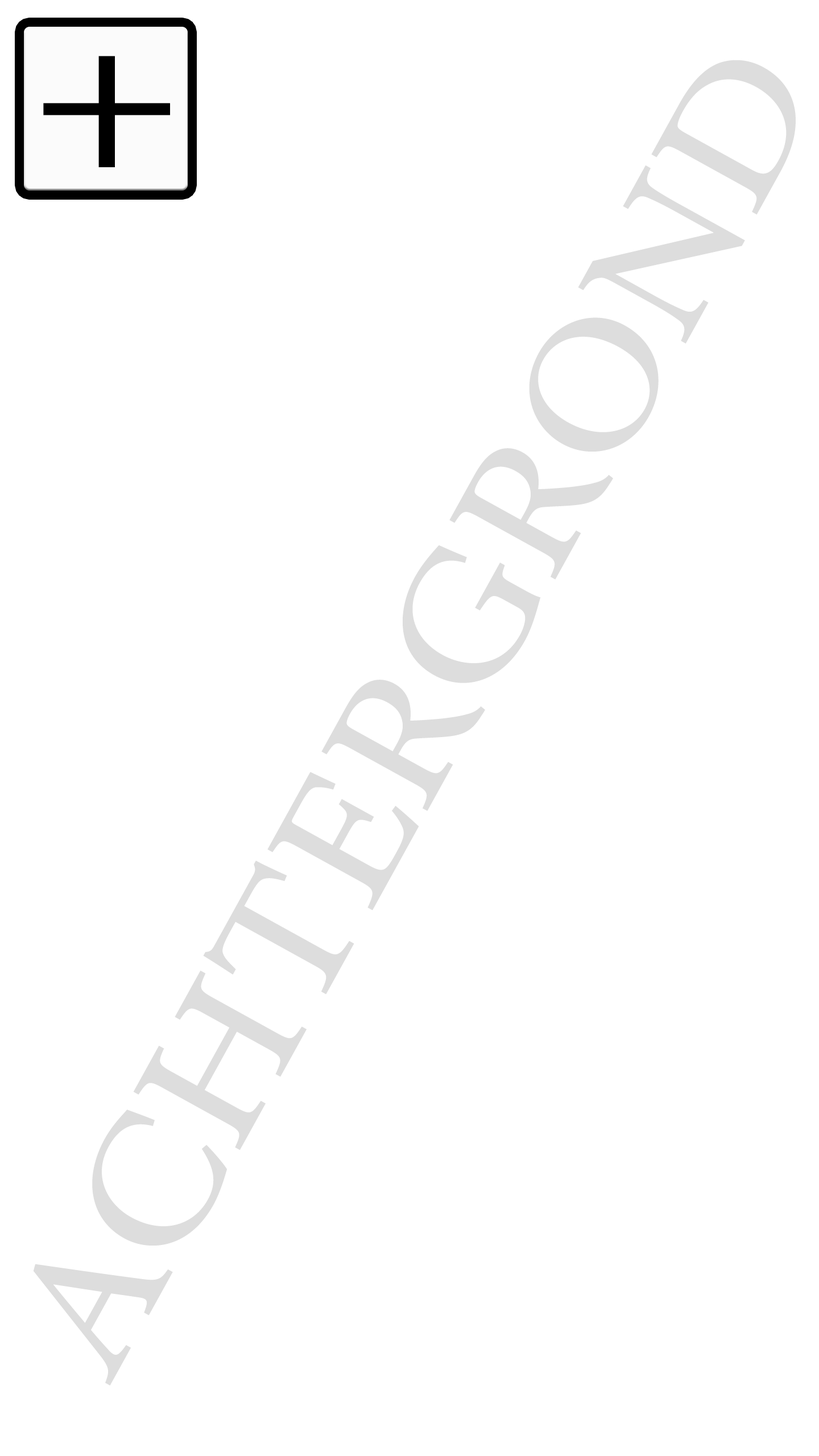
<style>
.page{position:relative;width:819px;height:1456px;background:#ffffff}
.page>*{position:absolute;margin:0}
.t1{font:260.9px "AdobeArabic-Regular";color:#dddddd}
</style>
<div class="page">
<p class="t1" style="left:33px;top:60px;width:763px;height:1325px;rotate:-61deg">ACHTERGROND</p>
</div>
